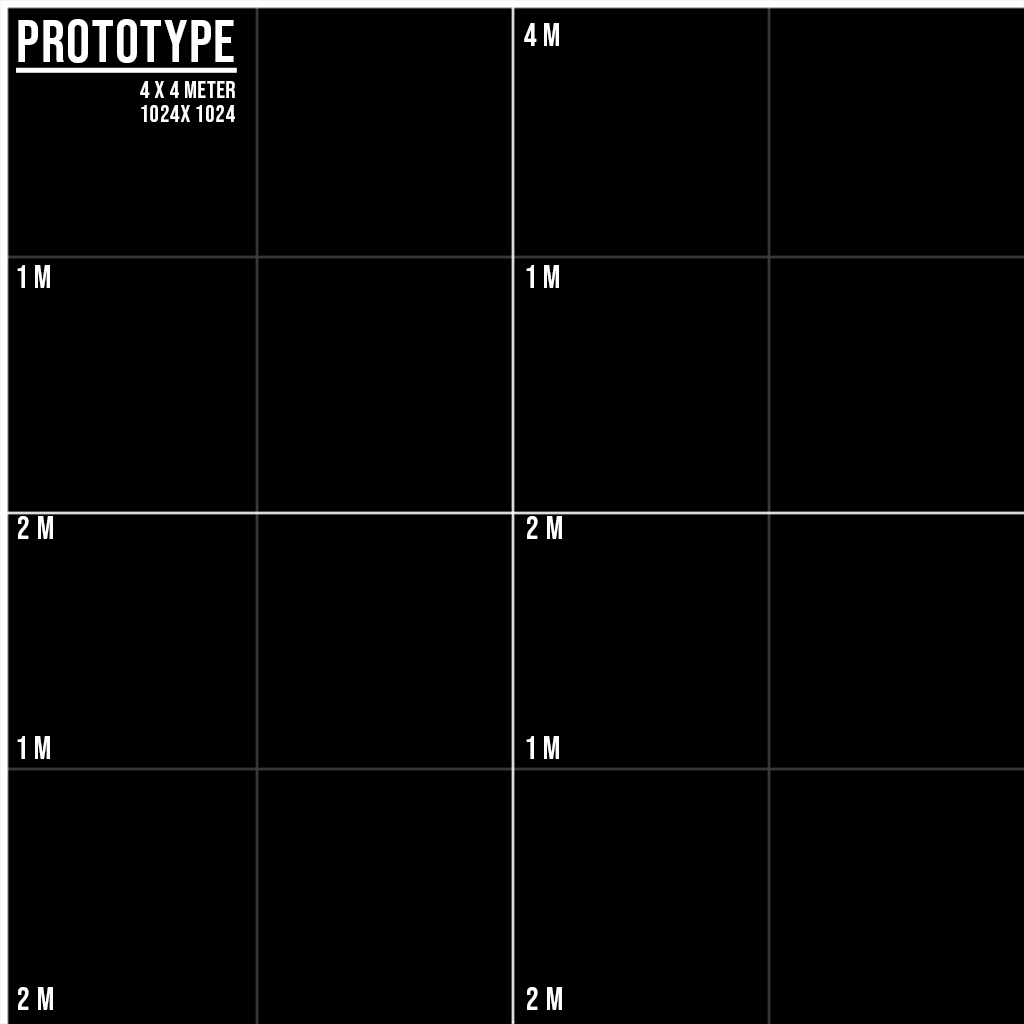
<style>
.page{position:relative;width:1024px;height:1024px;background:#000000}
.page>*{position:absolute;margin:0}
.t1{font:24px/36px "BebasNeue-Regular";letter-spacing:0.025em;color:#ffffff}
.t2{font:60px/36px "BebasNeue-Regular";letter-spacing:0.025em;color:#ffffff;text-decoration:underline}
.t3{font:24px/24px "BebasNeue-Regular";letter-spacing:0.025em;color:#ffffff}
.t4{font:32px "BebasNeue-Regular";letter-spacing:0.025em;color:#ffffff}
</style>
<div class="page">
<p class="t1" style="left:16px;top:19px;width:221px;height:103px;text-align:right"><span class="t2">PROTOTYPE<br></span>4 x 4 METER<br><span class="t3">1024x 1024</span></p>
<p class="t4" style="left:524px;top:23px;width:35px;height:23px">4 M</p>
<p class="t4" style="left:17px;top:265px;width:33px;height:23px">1 m</p>
<p class="t4" style="left:526px;top:265px;width:33px;height:23px">1 m</p>
<p class="t4" style="left:18px;top:516px;width:35px;height:23px">2 m</p>
<p class="t4" style="left:527px;top:516px;width:35px;height:23px">2 m</p>
<p class="t4" style="left:17px;top:736px;width:33px;height:23px">1 m</p>
<p class="t4" style="left:526px;top:736px;width:33px;height:23px">1 m</p>
<p class="t4" style="left:18px;top:987px;width:35px;height:23px">2 m</p>
<p class="t4" style="left:527px;top:987px;width:35px;height:23px">2 m</p>
</div>
